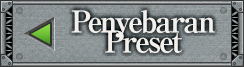
<style>
.page{position:relative;width:244px;height:67px}
.page>*{position:absolute;margin:0}
.t1{font:30px/20px "RyuminPro-ExBold";letter-spacing:-0.08em;color:#f2f0ed}
</style>
<div class="page">
<p class="t1" style="left:71px;top:10px;width:144px;height:43px;text-align:center">Penyebaran<br>Preset</p>
</div>
